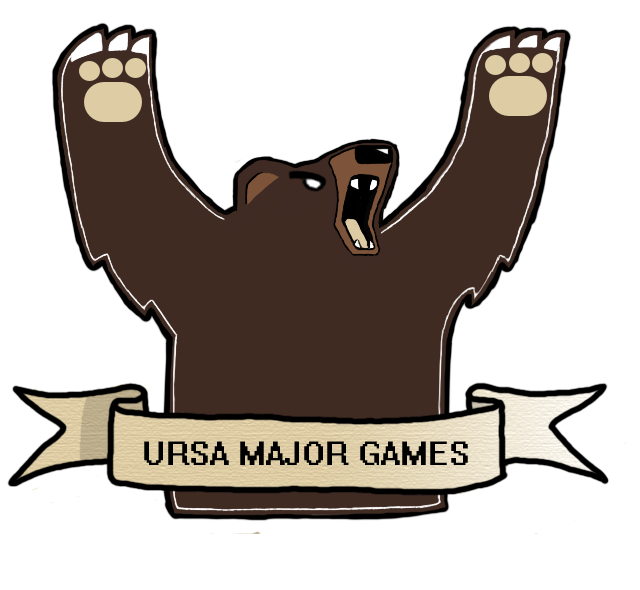
<style>
.page{position:relative;width:640px;height:590px;background:#ffffff}
.page>*{position:absolute;margin:0}
.t1{font:30px "System";color:#000000}
</style>
<div class="page">
<p class="t1" style="left:144px;top:441px;width:324px;height:24px">URSA MAJOR GAMES</p>
</div>
